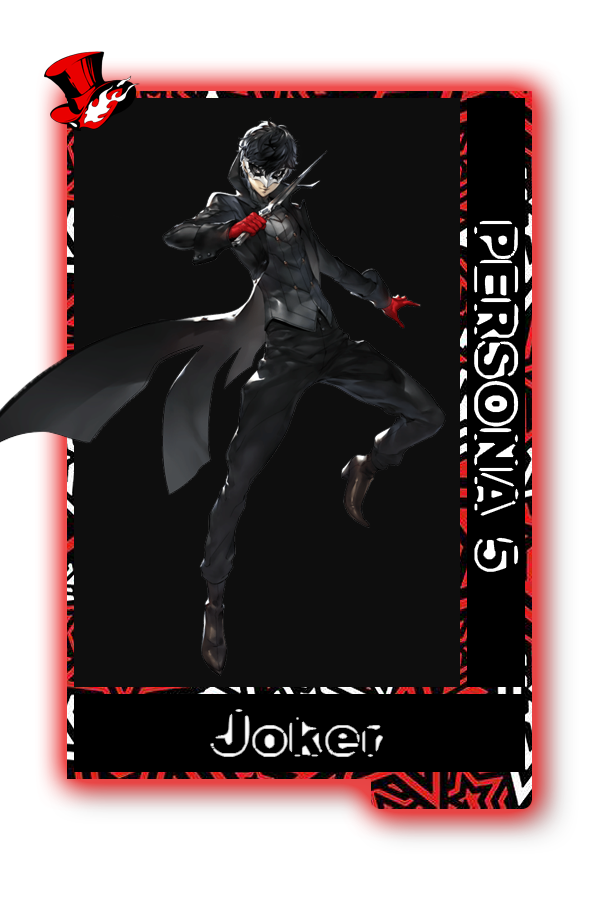
<style>
.page{position:relative;width:600px;height:900px;background:#0e0e0e}
.page>*{position:absolute;margin:0}
.t1{font:41.7px "Untitled";color:#ffffff}
.t2{font:45.8px "Untitled";color:#fdfdfd}
</style>
<div class="page">
<p class="t1" style="left:475px;top:221px;width:43px;height:350px;rotate:90deg">PERSONA 5</p>
<p class="t2" style="left:211px;top:710px;width:171px;height:46px">Joker</p>
</div>
